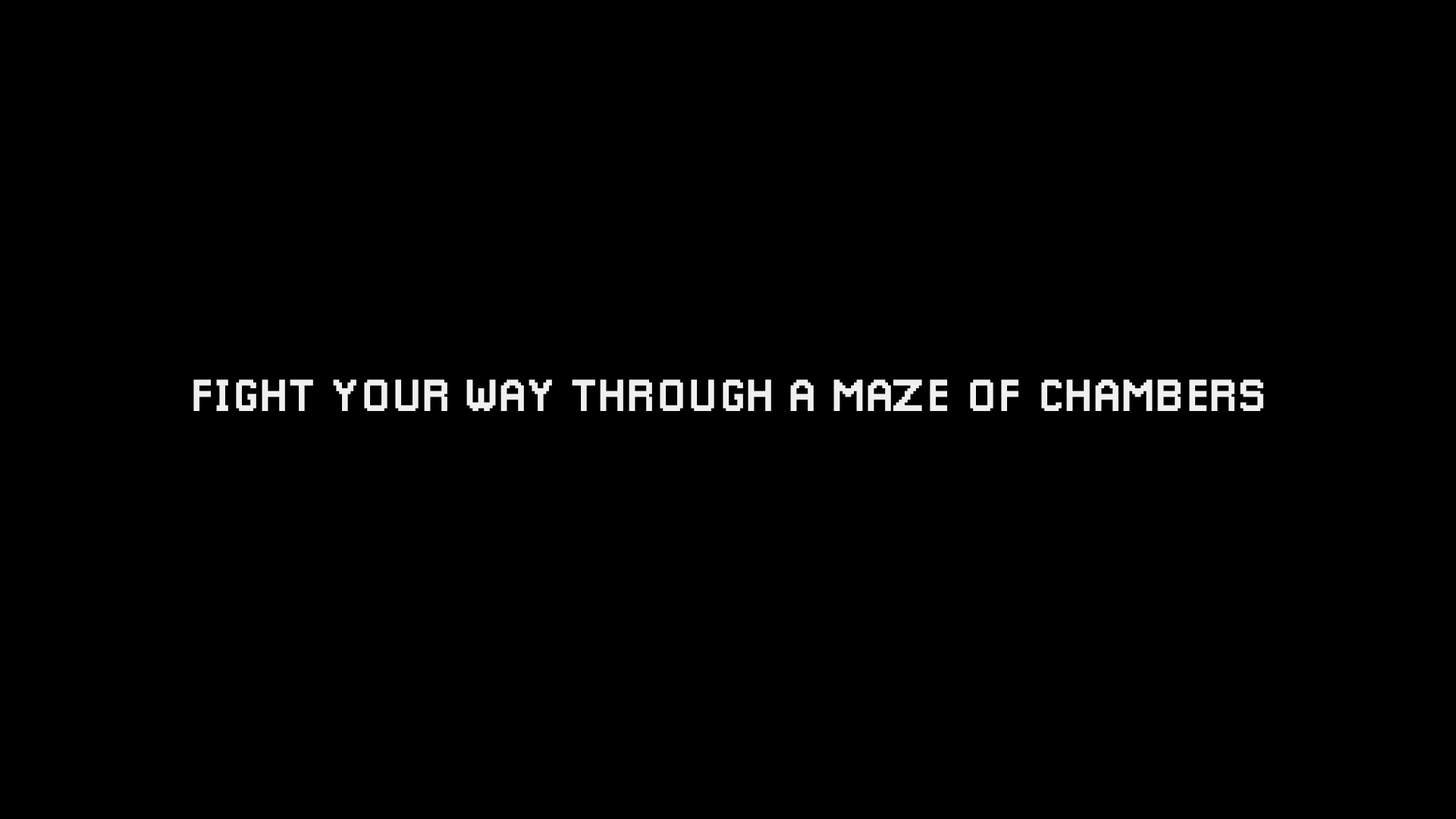
<style>
.page{position:relative;width:1456px;height:819px;background:#000000}
.page>*{position:absolute;margin:0}
.t1{font:45.5px "Pixellari";color:#f0f0f0}
</style>
<div class="page">
<p class="t1" style="left:193px;top:379px;width:1070px;height:32px">FIGHT YOUR WAY THROUGH A MAZE OF CHAMBERS</p>
</div>
